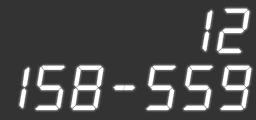
<style>
.page{position:relative;width:256px;height:120px;background:#333333}
.page>*{position:absolute;margin:0}
.t1{font:63.2px "alarmclock";color:#ffffff}
</style>
<div class="page">
<p class="t1" style="left:202px;top:8px;width:48px;height:46px">12</p>
<p class="t1" style="left:19px;top:65px;width:233px;height:46px">158-559</p>
</div>
